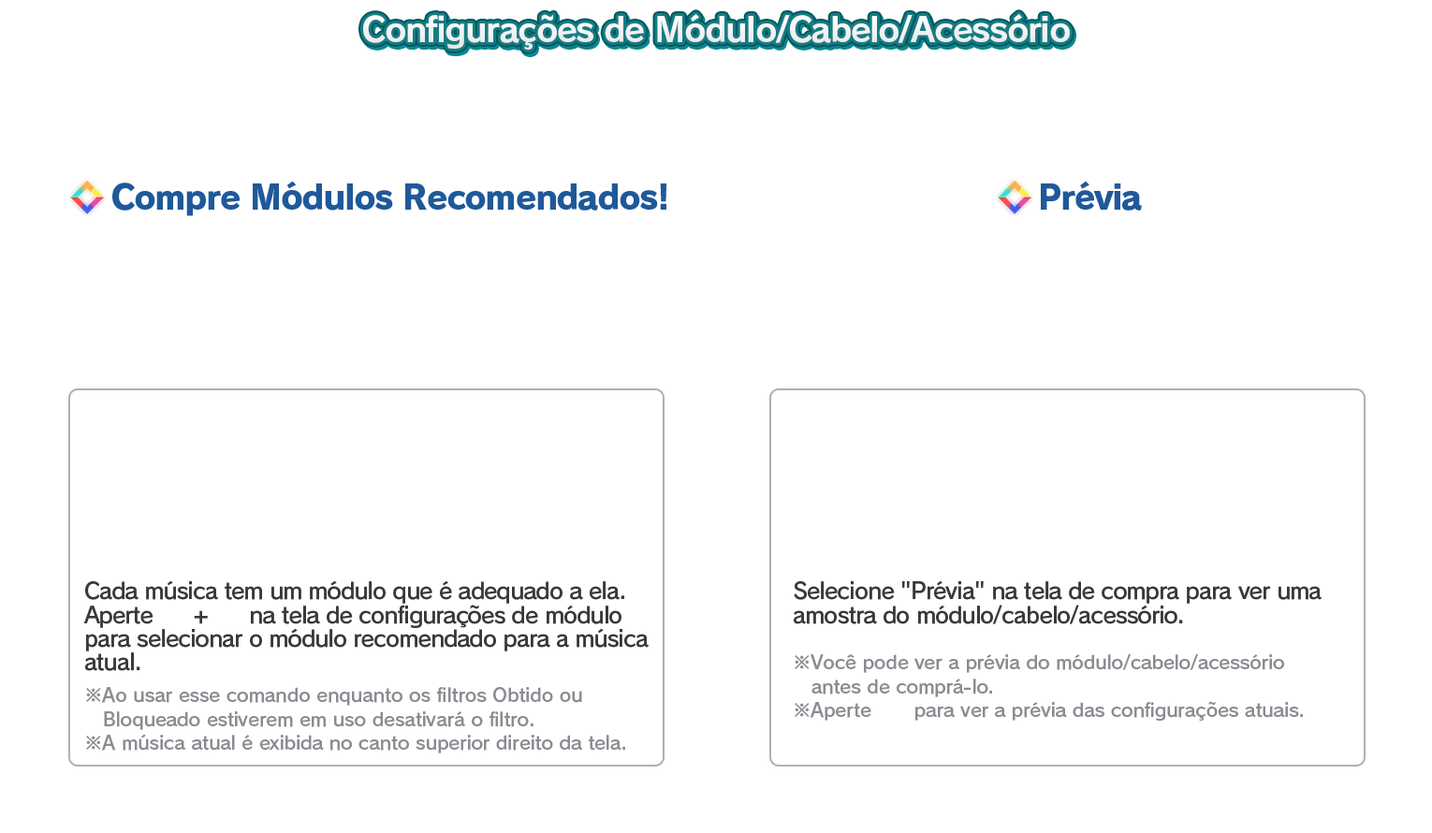
<style>
.page{position:relative;width:1432px;height:833px;background:#ffffff}
.page>*{position:absolute;margin:0}
.t1{font:33.7px "RodinPro-B";letter-spacing:-0.039em;color:#f2f2f3}
.t2{font:33.7px "RodinPro-EB";letter-spacing:-0.04em;color:#1f599a}
.t3{font:22.5px/23.7px "RodinPro-DB";letter-spacing:-0.04em;color:#383a3a}
.t4{font:18.7px/23.7px "RodinPro-DB";letter-spacing:-0.014em;color:#8c8b92}
</style>
<div class="page">
<p class="t1" style="left:363px;top:14px;width:707px;height:36px">Configurações de Módulo/Cabelo/Acessório</p>
<p class="t2" style="left:112px;top:181px;width:554px;height:35px">Compre Módulos Recomendados!</p>
<p class="t2" style="left:1041px;top:181px;width:101px;height:30px">Prévia</p>
<p class="t3" style="left:84px;top:580px;width:564px;height:91px">Cada música tem um módulo que é adequado a ela.<br>Aperte      +      na tela de configurações de módulo<br>para selecionar o módulo recomendado para a música<br>atual.</p>
<p class="t3" style="left:794px;top:580px;width:527px;height:44px">Selecione "Prévia" na tela de compra para ver uma<br>amostra do módulo/cabelo/acessório.</p>
<p class="t4" style="left:794px;top:653px;width:509px;height:68px">※Você pode ver a prévia do módulo/cabelo/acessório<br>   antes de comprá-lo.<br>※Aperte       para ver a prévia das configurações atuais.</p>
<p class="t4" style="left:86px;top:687px;width:539px;height:66px">※Ao usar esse comando enquanto os filtros Obtido ou<br>   Bloqueado estiverem em uso desativará o filtro.<br>※A música atual é exibida no canto superior direito da tela.</p>
</div>
